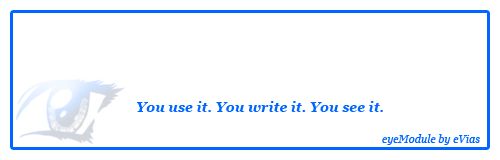
<style>
.page{position:relative;width:500px;height:160px;background:#ffffff}
.page>*{position:absolute;margin:0}
.t1{font:14px "Georgia-BoldItalic";color:#0066ff}
.t2{font:11px "Georgia-Italic";color:#0066ff}
</style>
<div class="page">
<p class="t1" style="left:136px;top:101px;width:247px;height:11px">You use it. You write it. You see it.</p>
<p class="t2" style="left:382px;top:134px;width:98px;height:11px">eyeModule by eVias</p>
</div>
